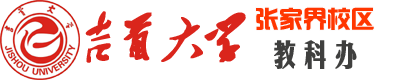
<style>
.page{position:relative;width:400px;height:80px;background:#ffffff}
.page>*{position:absolute;margin:0}
.t1{font:48px "²ÝÌ´Õ«Ã«Ôó¶«×ÖÌå";letter-spacing:-0.1em;color:#da251c;font-weight:bold}
.t2{font:24px "hzgb";color:#ff3600}
.t3{font:30px "FZMHJW--GB1-0";color:#3f3f3e;font-weight:bold}
</style>
<div class="page">
<p class="t1" style="left:85px;top:11px;width:161px;height:52px">吉首大学</p>
<p class="t2" style="left:256px;top:7px;width:118px;height:23px">张家界校区</p>
<p class="t3" style="left:274px;top:40px;width:83px;height:29px">教科办</p>
</div>
